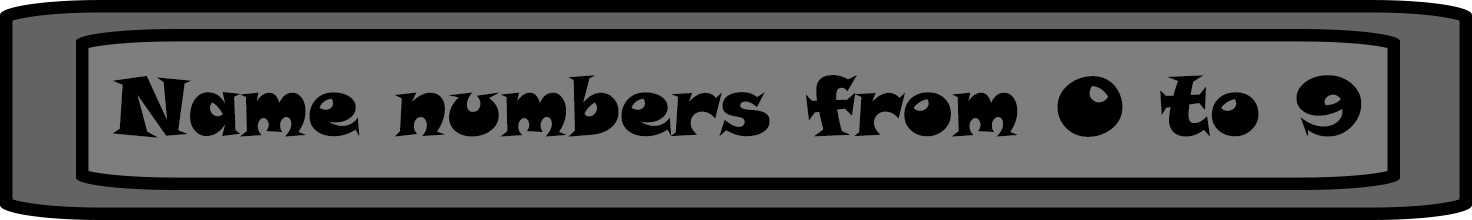
<style>
.page{position:relative;width:1472px;height:220px;background:#7e7e7e}
.page>*{position:absolute;margin:0}
.t1{font:82px "SnapITC-Regular";color:#000000}
</style>
<div class="page">
<p class="t1" style="left:113px;top:75px;width:1249px;height:63px">Name numbers from 0 to 9</p>
</div>
